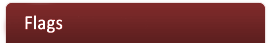
<style>
.page{position:relative;width:271px;height:43px}
.page>*{position:absolute;margin:0}
.t1{font:20px "Calibri";color:#ffffff;font-weight:bold;scale:0.9 1}
</style>
<div class="page">
<p class="t1" style="left:25px;top:15px;width:38px;height:18px">Flags</p>
</div>
